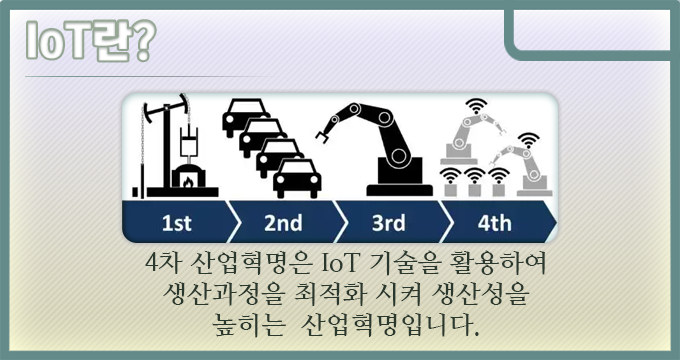
<style>
.page{position:relative;width:680px;height:360px}
.page>*{position:absolute;margin:0}
.t1{font:44px "KoreanTITGD5-R";letter-spacing:-0.01em;color:#ffffff}
.t2{font:26px "NanumMyeongjoBold";letter-spacing:-0.01em;color:#2a382e}
</style>
<div class="page">
<p class="t1" style="left:28px;top:21px;width:127px;height:40px">IoT란?</p>
<p class="t2" style="left:145px;top:250px;width:400px;height:88px;text-align:center">4차 산업혁명은 IoT 기술을 활용하여 생산과정을 최적화 시켜 생산성을 높히는  산업혁명입니다.</p>
</div>
